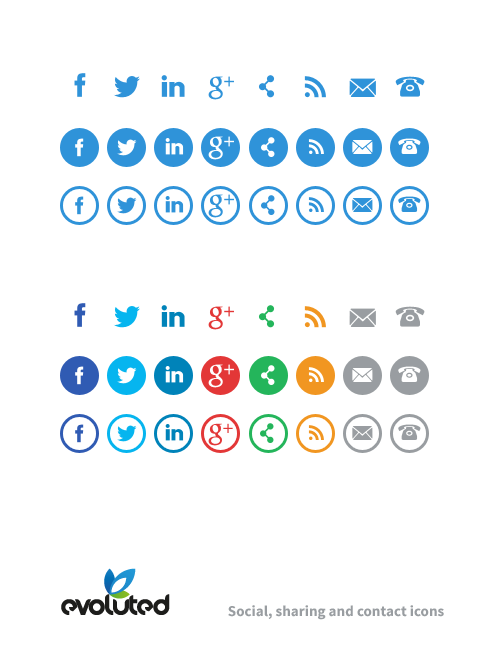
<style>
.page{position:relative;width:500px;height:672px;background:#ffffff}
.page>*{position:absolute;margin:0}
.t1{font:15px "SourceSansPro-Bold";color:#999ea1}
</style>
<div class="page">
<p class="t1" style="left:228px;top:605px;width:216px;height:15px">Social, sharing and contact icons</p>
</div>
